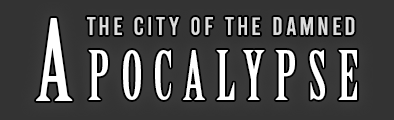
<style>
.page{position:relative;width:394px;height:120px;background:#333333}
.page>*{position:absolute;margin:0}
.t1{font:24.9px "Bebas-Regular";letter-spacing:0.12em;color:#dcdcdc}
.t2{font:110.4px "BirchStd";letter-spacing:0.16em;color:#ffffff;font-variant:small-caps}
.t3{font:96px "BirchStd";letter-spacing:0.16em;color:#ffffff;font-variant:small-caps}
</style>
<div class="page">
<p class="t1" style="left:87px;top:17px;width:268px;height:18px">THE CITY OF THE DAMNED</p>
<p class="t2" style="left:36px;top:18px;width:37px;height:83px">A</p>
<p class="t3" style="left:88px;top:50px;width:269px;height:50px">pocalypse</p>
</div>
